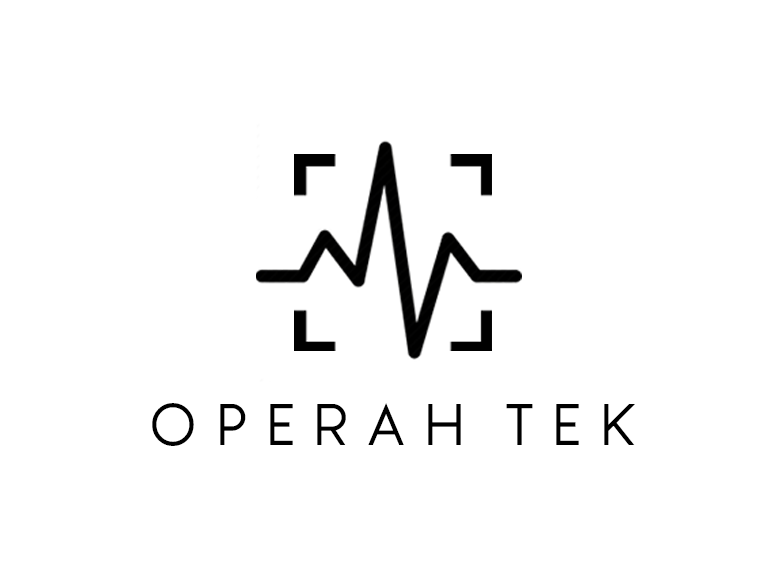
<style>
.page{position:relative;width:783px;height:571px;background:#ffffff}
.page>*{position:absolute;margin:0}
.t1{font:55.4px "WatchwordRegularDemo";letter-spacing:0.37em;color:#000000}
.t2{font:64.8px "WatchwordBoldDemo";letter-spacing:-0.01em;color:#000000}
.t3{font:55.4px "WatchwordRegularDemo";letter-spacing:0.25em;color:#000000}
</style>
<div class="page">
<p class="t1" style="left:152px;top:403px;width:483px;height:43px"><span class="t2">    </span>OPERA<span class="t3">H </span>TEK</p>
</div>
